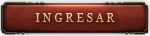
<style>
.page{position:relative;width:150px;height:36px}
.page>*{position:absolute;margin:0}
.t1{font:11.5px "Georgia";letter-spacing:0.25em;text-transform:uppercase}
</style>
<div class="page">
<p class="t1" style="left:35px;top:14px;width:80px;height:9px">INGRESAR</p>
<p class="t1" style="left:35px;top:13px;width:80px;height:9px">INGRESAR</p>
<p class="t1" style="left:35px;top:13px;width:80px;height:9px">INGRESAR</p>
<p class="t1" style="left:35px;top:13px;width:80px;height:9px">INGRESAR</p>
</div>
